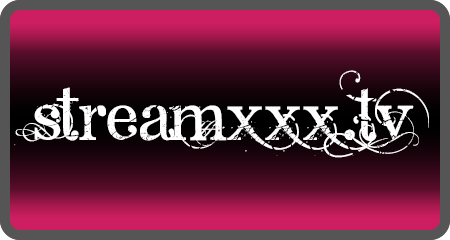
<style>
.page{position:relative;width:450px;height:240px}
.page>*{position:absolute;margin:0}
.t1{font:75px "AngelicPeace";color:#ffffff}
</style>
<div class="page">
<p class="t1" style="left:14px;top:70px;width:415px;height:88px">StreamXXX.TV</p>
</div>
